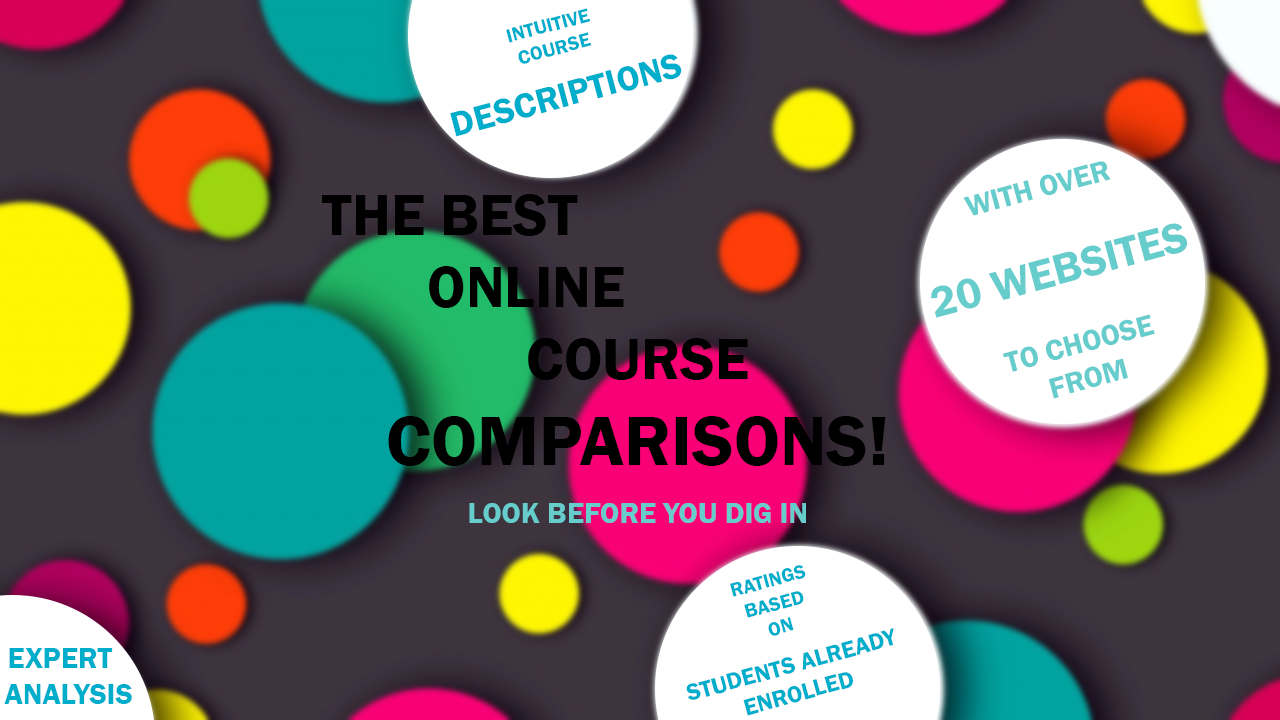
<style>
.page{position:relative;width:1280px;height:720px;background:#3e343d}
.page>*{position:absolute;margin:0}
.t1{font:30px "FranklinGothic-Demi";color:#66cccc}
.t2{font:30px "FranklinGothic-Demi";color:#000000}
.t3{font:44px "FranklinGothic-Demi";color:#66cccc}
.t4{font:60px "FranklinGothic-Demi";color:#000000}
.t5{font:72px "FranklinGothic-Demi";color:#000000}
.t6{font:24px "FranklinGothic-Demi";color:#00aecc}
.t7{font:20px "FranklinGothic-Demi";color:#00aecc}
.t8{font:30px "FranklinGothic-Demi";color:#00aecc}
</style>
<div class="page">
<p class="t1" style="left:931px;top:161px;width:256px;height:238px;text-align:center;rotate:-15deg"><span class="t2"><br></span>WITH OVER <br><br><br><br><span class="t3">20 WEBSITES<br><br><br><br></span>TO CHOOSE<br>FROM</p>
<p class="t4" style="left:322px;top:194px;width:564px;height:329px">THE BEST<br>       ONLINE <br>COURSE <span class="t5">COMPARISONS!<br><br></span><span class="t1">LOOK BEFORE YOU DIG IN</span></p>
<p class="t6" style="left:686px;top:565px;width:208px;height:151px;text-align:center;rotate:-15deg"><span class="t7"><br>RATINGS<br>BASED<br>ON<br><br></span>STUDENTS ALREADY<br>ENROLLED</p>
<p class="t8" style="left:4px;top:648px;width:128px;height:56px;text-align:center"><span class="t7"><br>            <br>                   </span>EXPERT <br>               ANALYSIS</p>
</div>
